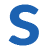
<style>
.page{position:relative;width:48px;height:48px;background:#ffffff}
.page>*{position:absolute;margin:0}
.t1{font:79.2px "Lato-Bold";letter-spacing:0.06em;color:#1c62b1}
</style>
<div class="page">
<p class="t1" style="left:8px;top:4px;width:31px;height:42px">s</p>
</div>
